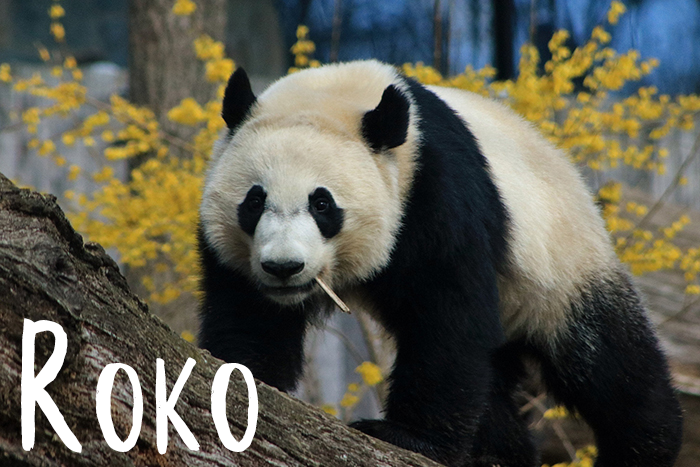
<style>
.page{position:relative;width:700px;height:467px}
.page>*{position:absolute;margin:0}
.t1{font:197.1px "Leafy";letter-spacing:0.02em;color:#ffffff;font-variant:small-caps;font-weight:bold}
</style>
<div class="page">
<p class="t1" style="left:21px;top:318px;width:238px;height:137px">Roko</p>
</div>
